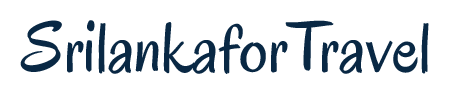
<style>
.page{position:relative;width:450px;height:100px;background:#ffffff}
.page>*{position:absolute;margin:0}
.t1{font:72px "Oregano-Regular";color:#092844}
</style>
<div class="page">
<p class="t1" style="left:20px;top:20px;width:409px;height:54px">SrilankaforTravel</p>
<p class="t1" style="left:20px;top:20px;width:409px;height:54px">SrilankaforTravel</p>
</div>
